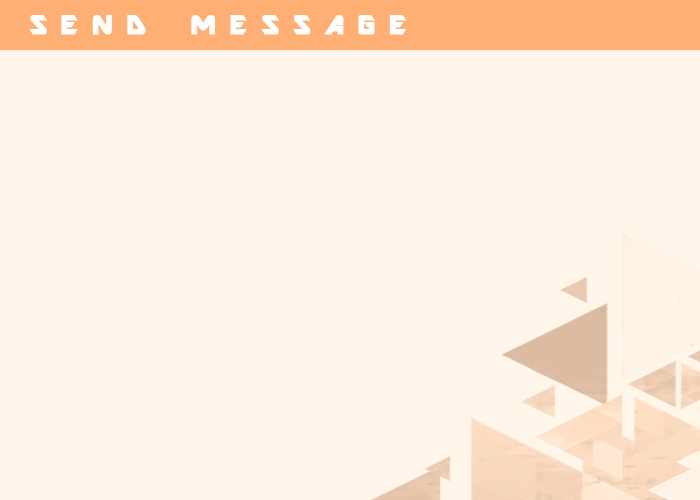
<style>
.page{position:relative;width:700px;height:500px;background:#fff5e8}
.page>*{position:absolute;margin:0}
.t1{font:30px "ARDESTINE";letter-spacing:-0.07em;color:#ffffff;font-weight:bold}
</style>
<div class="page">
<p class="t1" style="left:29px;top:15px;width:377px;height:20px">S E N D   M E S S A G E</p>
</div>
